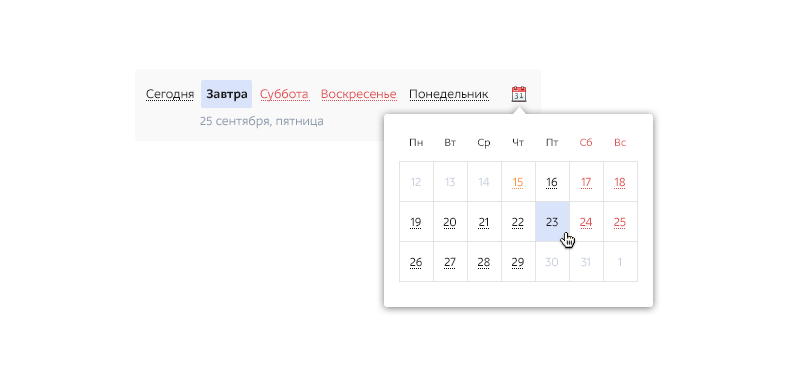
<style>
.page{position:relative;width:788px;height:376px;background:#ffffff}
.page>*{position:absolute;margin:0}
.t1{font:13px "M.Video-Regular";color:#df4e51}
.t2{font:13px "M.Video-Regular";color:#1b1b1b}
.t3{font:13px "M.Video-Bold";color:#1b1b1b}
.t4{font:13px "M.Video-Regular";color:#8c99aa}
.t5{font:13px/40px "M.Video-Regular";color:#1b1b1b}
.t6{font:11px/40px "M.Video-Regular";color:#1b1b1b}
.t7{font:13px/40px "M.Video-Regular";color:#c8d1de}
.t8{font:13px/40px "M.Video-Regular";color:#ff953c}
.t9{font:13px/40px "M.Video-Regular"}
.t10{font:11px/40px "M.Video-Regular"}
.t11{font:13px/40px "M.Video-Regular";color:#df4e51}
.t12{font:11px/40px "M.Video-Regular";color:#df4e51}
</style>
<div class="page">
<p class="t1" style="left:146px;top:88px;width:343px;height:14px"><span class="t2">Сегодня    </span><span class="t3">Завтра    </span>Суббота    Воскресенье<span class="t2">    Понедельник</span></p>
<p class="t4" style="left:200px;top:115px;width:123px;height:14px">25 сентября, пятница</p>
<p class="t5" style="left:410px;top:138px;width:13px;height:129px;text-align:center"><span class="t6">Пн<br></span><span class="t7">12<br></span>19<br>26</p>
<p class="t5" style="left:443px;top:138px;width:13px;height:128px;text-align:center"><span class="t6">Вт<br></span><span class="t7">13<br></span>20<br>27</p>
<p class="t5" style="left:478px;top:138px;width:12px;height:129px;text-align:center"><span class="t6">Ср<br></span><span class="t7">14<br></span>21<br>28</p>
<p class="t5" style="left:512px;top:138px;width:12px;height:129px;text-align:center"><span class="t6">Чт<br></span><span class="t8">15<br></span>22<br>29</p>
<p class="t9" style="left:545px;top:138px;width:14px;height:129px;text-align:center"><span class="t10">Пт<br></span>16<br>23<br>30</p>
<p class="t11" style="left:580px;top:138px;width:12px;height:129px;text-align:center"><span class="t12">Сб<br></span>17<br>24<br><span class="t7">31</span></p>
<p class="t11" style="left:614px;top:138px;width:12px;height:128px;text-align:center"><span class="t12">Вс<br></span>18<br>25<br><span class="t7">1</span></p>
</div>
